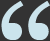
<style>
.page{position:relative;width:50px;height:41px;background:#333333}
.page>*{position:absolute;margin:0}
.t1{font:148px "Georgia";color:#cbe4ec}
</style>
<div class="page">
<p class="t1" style="left:1px;top:1px;width:49px;height:39px">“</p>
</div>
